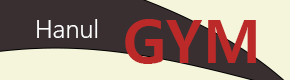
<style>
.page{position:relative;width:290px;height:80px;background:#f5f5dc}
.page>*{position:absolute;margin:0}
.t1{font:25px "MalgunGothic-Semilight";color:#ffffff}
.t2{font:60px "MalgunGothicBold";color:#bc2929}
</style>
<div class="page">
<p class="t1" style="left:37px;top:19px;width:61px;height:19px">Hanul</p>
<p class="t2" style="left:125px;top:19px;width:131px;height:45px">GYM</p>
</div>
